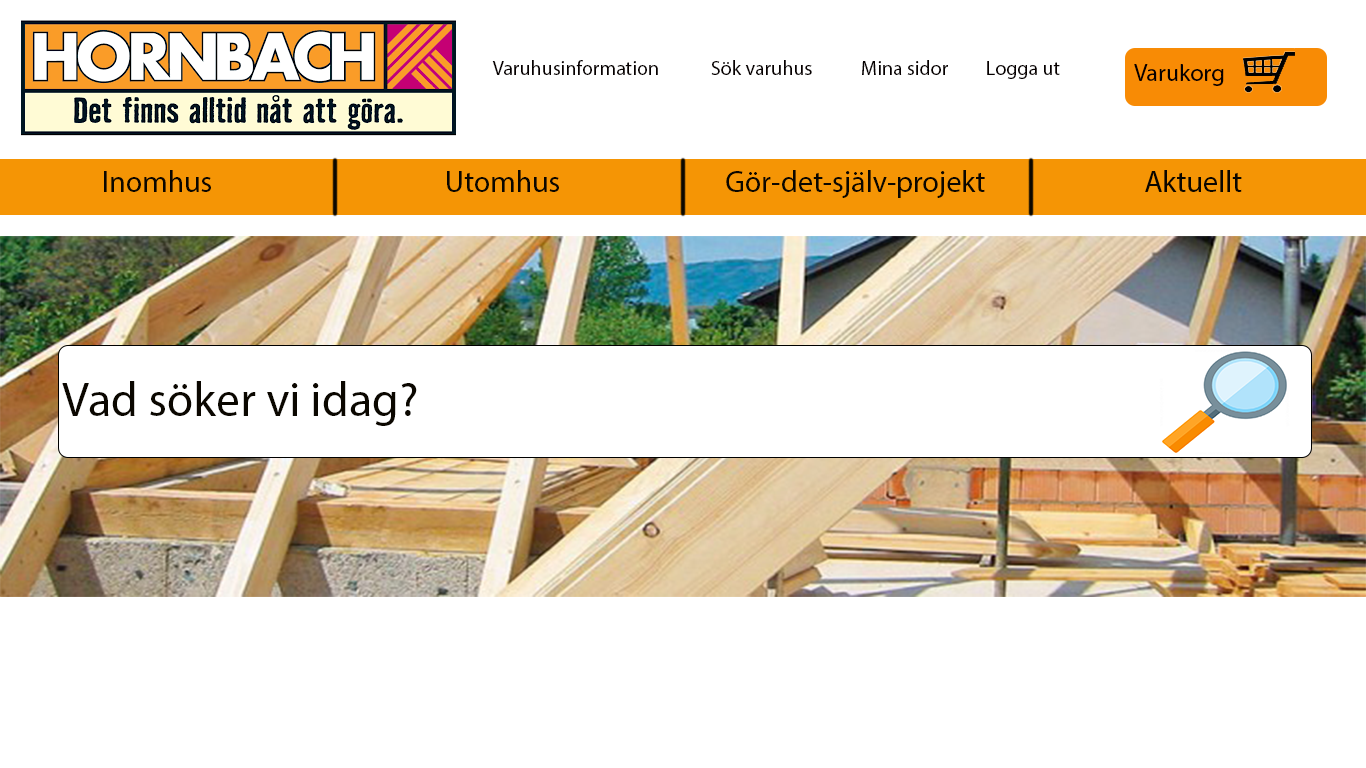
<style>
.page{position:relative;width:1366px;height:768px;background:#ffffff}
.page>*{position:absolute;margin:0}
.t1{font:20px "MyriadPro-Regular";color:#060000}
.t2{font:24px "MyriadPro-Regular";color:#060000}
.t3{font:30px "MyriadPro-Regular";color:#0b0700}
.t4{font:48px "MyriadPro-Regular";color:#0b0700}
</style>
<div class="page">
<p class="t1" style="left:492px;top:60px;width:166px;height:15px">Varuhusinformation</p>
<p class="t1" style="left:711px;top:60px;width:101px;height:15px">Sök varuhus</p>
<p class="t1" style="left:862px;top:60px;width:86px;height:15px">Mina sidor</p>
<p class="t1" style="left:987px;top:61px;width:73px;height:18px">Logga ut</p>
<p class="t2" style="left:1134px;top:64px;width:90px;height:22px">Varukorg</p>
<p class="t3" style="left:104px;top:170px;width:107px;height:22px">Inomhus</p>
<p class="t3" style="left:447px;top:170px;width:112px;height:22px">Utomhus</p>
<p class="t3" style="left:726px;top:170px;width:259px;height:28px">Gör-det-själv-projekt</p>
<p class="t3" style="left:1145px;top:170px;width:97px;height:22px">Aktuellt</p>
<p class="t4" style="left:62px;top:381px;width:355px;height:45px">Vad söker vi idag?</p>
</div>
